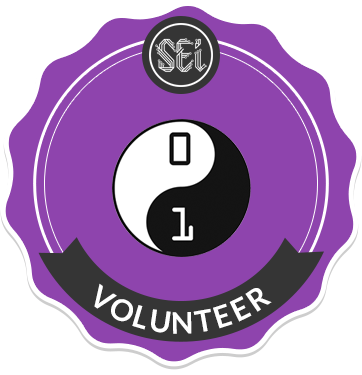
<style>
.page{position:relative;width:362px;height:375px;background:#8e44ad}
.page>*{position:absolute;margin:0}
.t1{font:29.7px/66.3px "Lato-Bold";letter-spacing:0.1em;color:#ffffff}
</style>
<div class="page">
<p class="t1" style="left:94px;top:283px;width:178px;height:51px;text-align:center">VOLUNTEER</p>
</div>
